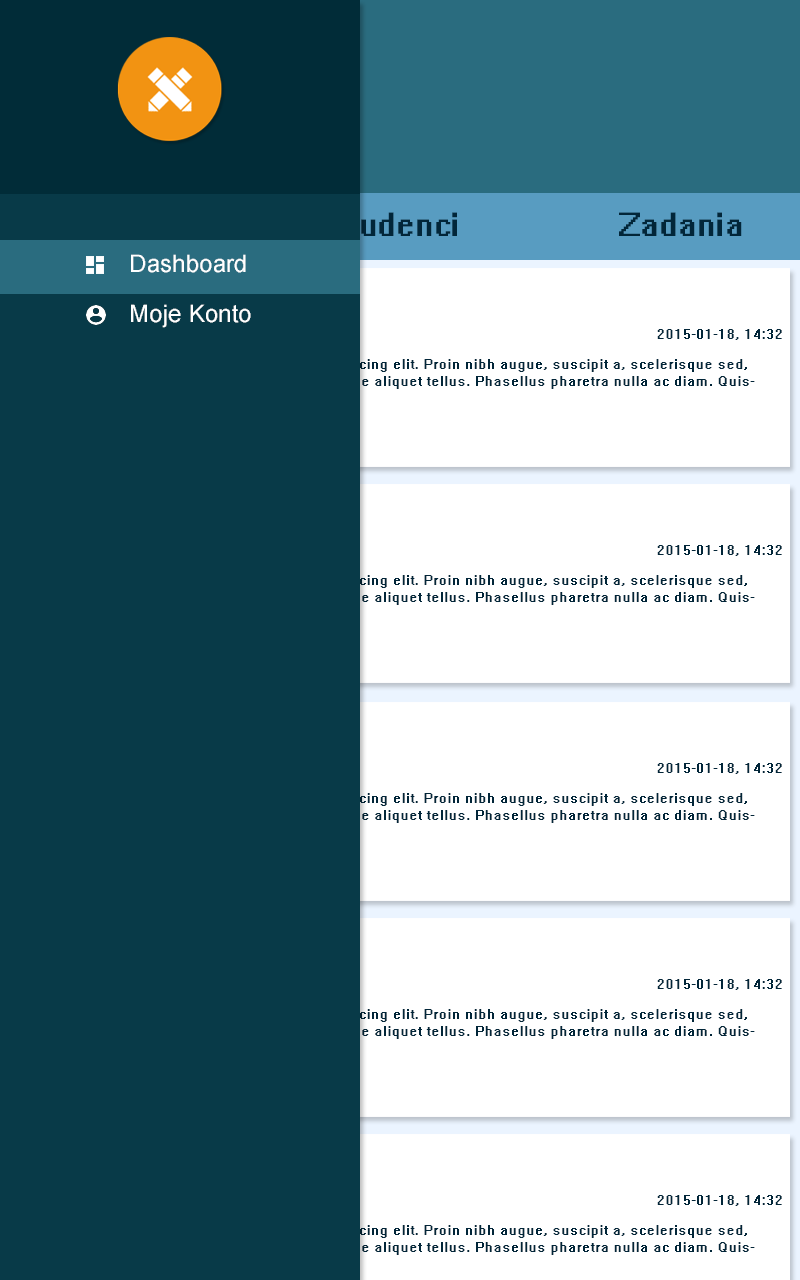
<style>
.page{position:relative;width:800px;height:1280px;background:#ffffff}
.page>*{position:absolute;margin:0}
.t1{font:30px "System";color:#022639}
.t2{font:24px "Small Fonts";color:#ffffff}
.t3{font:14px "System";color:#022639}
</style>
<div class="page">
<p class="t1" style="left:330px;top:212px;width:127px;height:24px">Studenci</p>
<p class="t1" style="left:619px;top:212px;width:123px;height:24px">Zadania</p>
<p class="t2" style="left:131px;top:254px;width:115px;height:19px">Dashboard</p>
<p class="t2" style="left:131px;top:304px;width:120px;height:24px">Moje Konto</p>
<p class="t3" style="left:657px;top:329px;width:125px;height:11px">2015-01-18, 14:32</p>
<p class="t3" style="left:22px;top:359px;width:733px;height:47px">Lorem ipsum dolor sit amet, consectetur adipisicing elit. Proin nibh augue, suscipit a, scelerisque sed, lacinia in, mi. Cras vel lorem. Etiam pellentesque aliquet tellus. Phasellus pharetra nulla ac diam. Quisque semper justo at risus.</p>
<p class="t3" style="left:657px;top:545px;width:125px;height:11px">2015-01-18, 14:32</p>
<p class="t3" style="left:22px;top:575px;width:733px;height:47px">Lorem ipsum dolor sit amet, consectetur adipisicing elit. Proin nibh augue, suscipit a, scelerisque sed, lacinia in, mi. Cras vel lorem. Etiam pellentesque aliquet tellus. Phasellus pharetra nulla ac diam. Quisque semper justo at risus.</p>
<p class="t3" style="left:657px;top:763px;width:125px;height:11px">2015-01-18, 14:32</p>
<p class="t3" style="left:22px;top:793px;width:733px;height:47px">Lorem ipsum dolor sit amet, consectetur adipisicing elit. Proin nibh augue, suscipit a, scelerisque sed, lacinia in, mi. Cras vel lorem. Etiam pellentesque aliquet tellus. Phasellus pharetra nulla ac diam. Quisque semper justo at risus.</p>
<p class="t3" style="left:657px;top:979px;width:125px;height:11px">2015-01-18, 14:32</p>
<p class="t3" style="left:22px;top:1009px;width:733px;height:47px">Lorem ipsum dolor sit amet, consectetur adipisicing elit. Proin nibh augue, suscipit a, scelerisque sed, lacinia in, mi. Cras vel lorem. Etiam pellentesque aliquet tellus. Phasellus pharetra nulla ac diam. Quisque semper justo at risus.</p>
<p class="t3" style="left:657px;top:1195px;width:125px;height:11px">2015-01-18, 14:32</p>
<p class="t3" style="left:22px;top:1225px;width:733px;height:47px">Lorem ipsum dolor sit amet, consectetur adipisicing elit. Proin nibh augue, suscipit a, scelerisque sed, lacinia in, mi. Cras vel lorem. Etiam pellentesque aliquet tellus. Phasellus pharetra nulla ac diam. Quisque semper justo at risus.</p>
</div>
